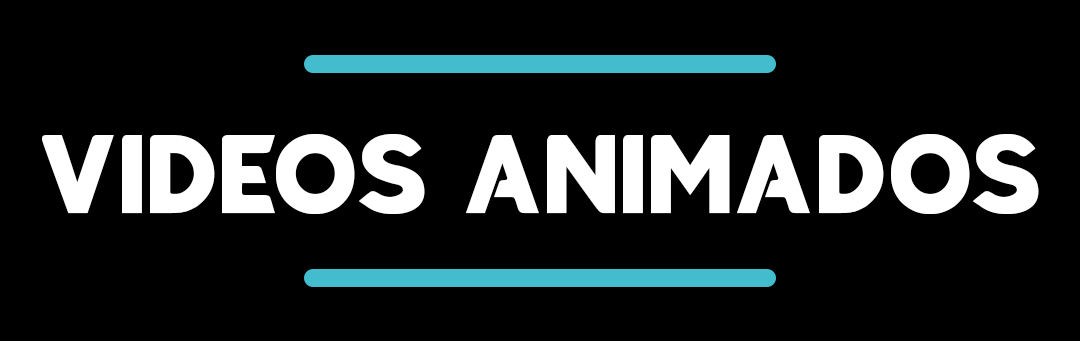
<style>
.page{position:relative;width:1080px;height:341px;background:#000000}
.page>*{position:absolute;margin:0}
.t1{font:111.9px "blantic";letter-spacing:0.05em;color:#ffffff}
</style>
<div class="page">
<p class="t1" style="left:42px;top:134px;width:997px;height:80px">VIDEOS ANIMADOS</p>
</div>
